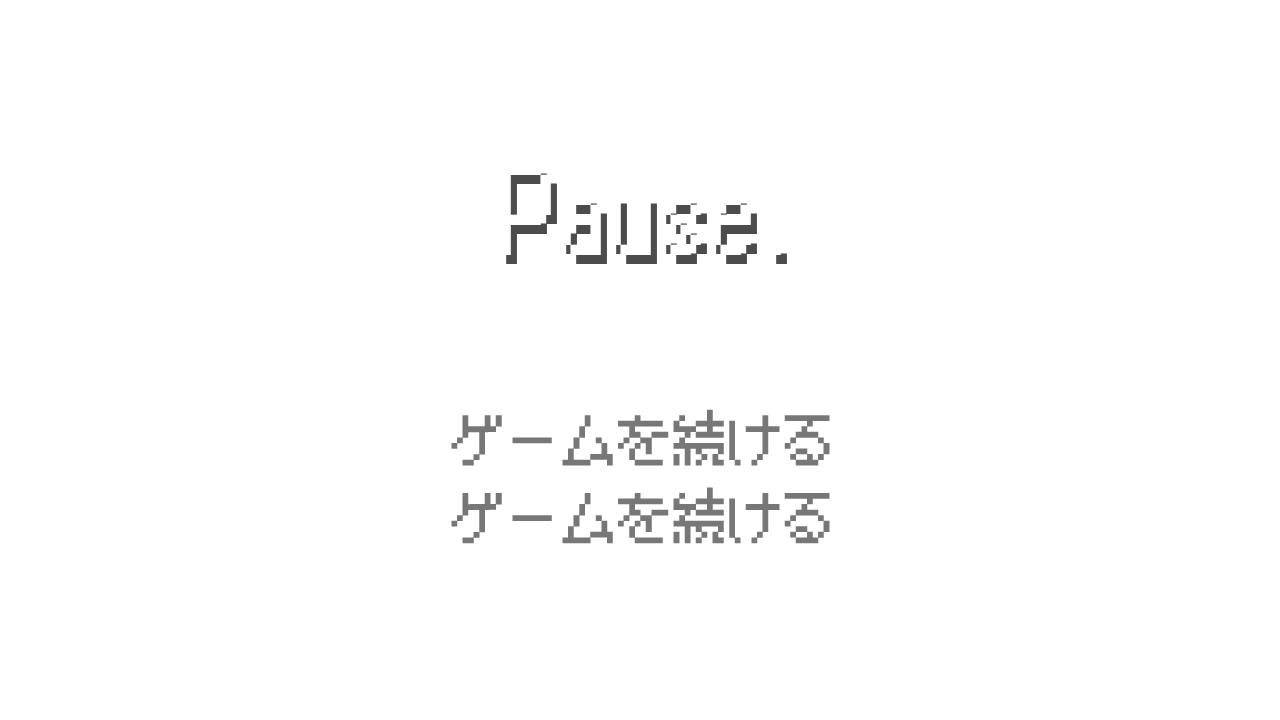
<style>
.page{position:relative;width:1280px;height:720px;background:#ffffff}
.page>*{position:absolute;margin:0}
.t1{font:55.6px/77.8px "BestTenDOT";color:#777777}
.t2{font:55.6px/77.8px "BestTenDOT";color:#ffffff}
</style>
<div class="page">
<p class="t1" style="left:451px;top:331px;width:379px;height:213px"><span class="t2">ゲームを続ける<br></span>ゲームを続ける<br>ゲームを続ける</p>
</div>
